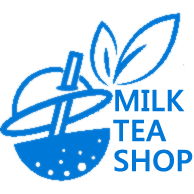
<style>
.page{position:relative;width:194px;height:194px;background:#ffffff}
.page>*{position:absolute;margin:0}
.t1{font:30px/30px "SegoeUI-Semibold";letter-spacing:-0.01em;color:#0078d7;font-weight:bold}
</style>
<div class="page">
<p class="t1" style="left:113px;top:89px;width:80px;height:83px">MILK<br>TEA<br>SHOP</p>
</div>
